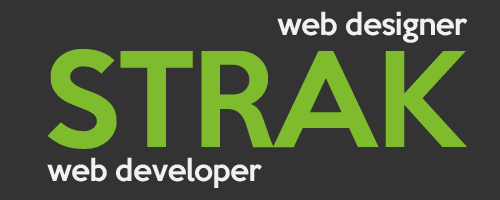
<style>
.page{position:relative;width:500px;height:200px;background:#333333}
.page>*{position:absolute;margin:0}
.t1{font:28px "KeepCalm-Medium";letter-spacing:-0.025em;color:#f1f1f1}
.t2{font:120px "KeepCalm-Medium";letter-spacing:-0.025em;color:#7ebc2d}
.t3{font:28px "KeepCalm-Medium";letter-spacing:-0.025em;color:#5c5c5e}
</style>
<div class="page">
<p class="t1" style="left:277px;top:11px;width:191px;height:32px">web designer</p>
<p class="t2" style="left:47px;top:49px;width:420px;height:100px">STRAK</p>
<p class="t1" style="left:47px;top:157px;width:215px;height:31px"><span class="t3"><br></span>web developer</p>
</div>
